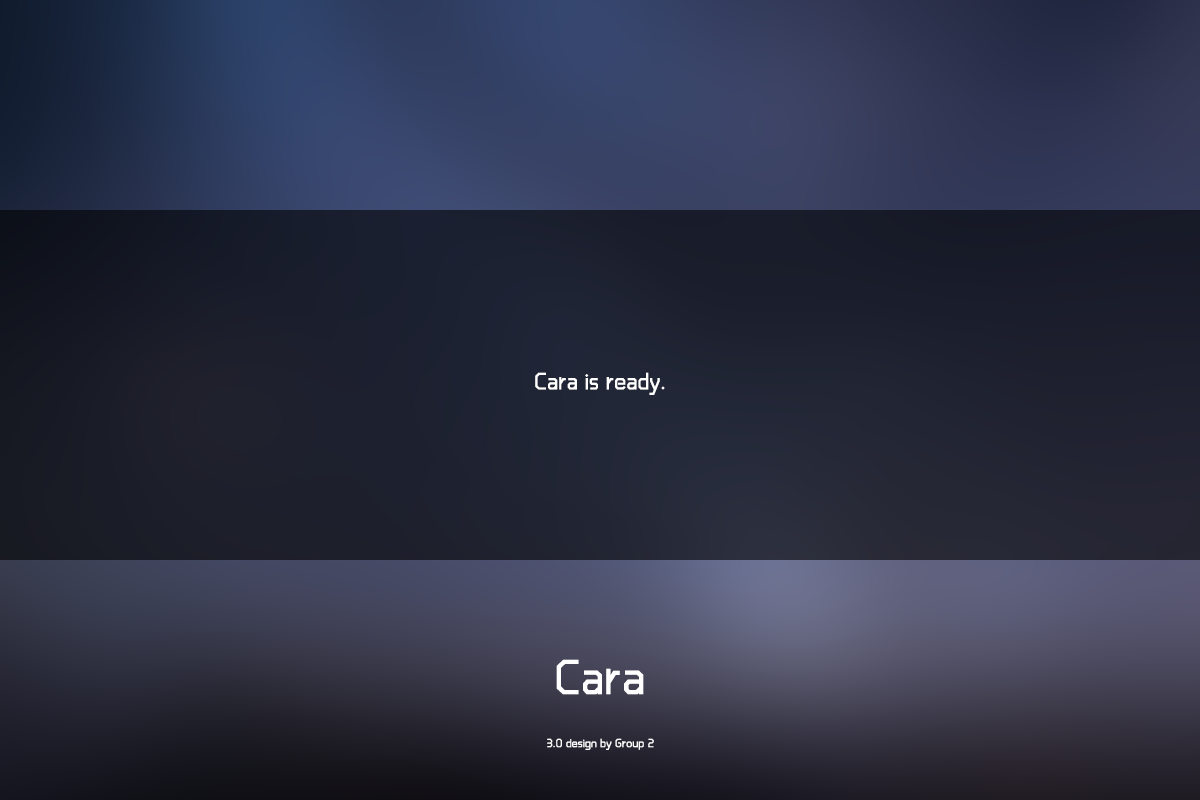
<style>
.page{position:relative;width:1200px;height:800px}
.page>*{position:absolute;margin:0}
.t1{font:24px "RTWSShangGoG0v1-Regular";letter-spacing:0.022em;color:#ffffff}
.t2{font:50px "RTWSShangGoG0v1-Regular";letter-spacing:0.022em;color:#ffffff}
.t3{font:12px "RTWSShangGoG0v1-Regular";letter-spacing:0.022em;color:#ffffff}
</style>
<div class="page">
<p class="t1" style="left:535px;top:372px;width:130px;height:23px">Cara is ready.</p>
<p class="t2" style="left:556px;top:659px;width:88px;height:36px">Cara</p>
<p class="t3" style="left:547px;top:738px;width:107px;height:12px">3.0 design by Group 2</p>
</div>
